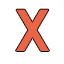
<style>
.page{position:relative;width:64px;height:64px;background:#ffffff}
.page>*{position:absolute;margin:0}
.t1{font:58.3px "Bahnschrift-Bold";letter-spacing:0.01em;color:#ec6446}
</style>
<div class="page">
<p class="t1" style="left:16px;top:9px;width:33px;height:42px">X</p>
</div>
